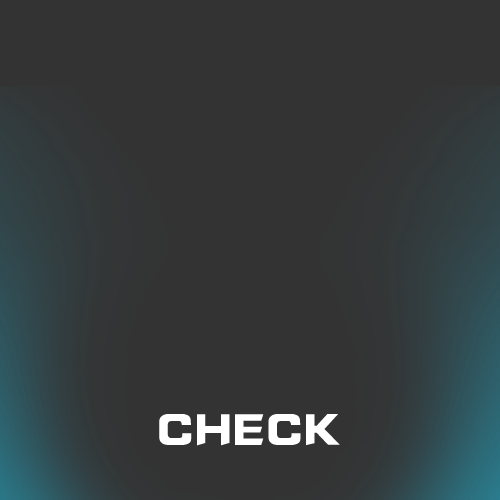
<style>
.page{position:relative;width:500px;height:500px;background:#333333}
.page>*{position:absolute;margin:0}
.t1{font:45.8px "HYk2gj";color:#ffffff}
</style>
<div class="page">
<p class="t1" style="left:159px;top:414px;width:181px;height:32px">CHECK</p>
</div>
